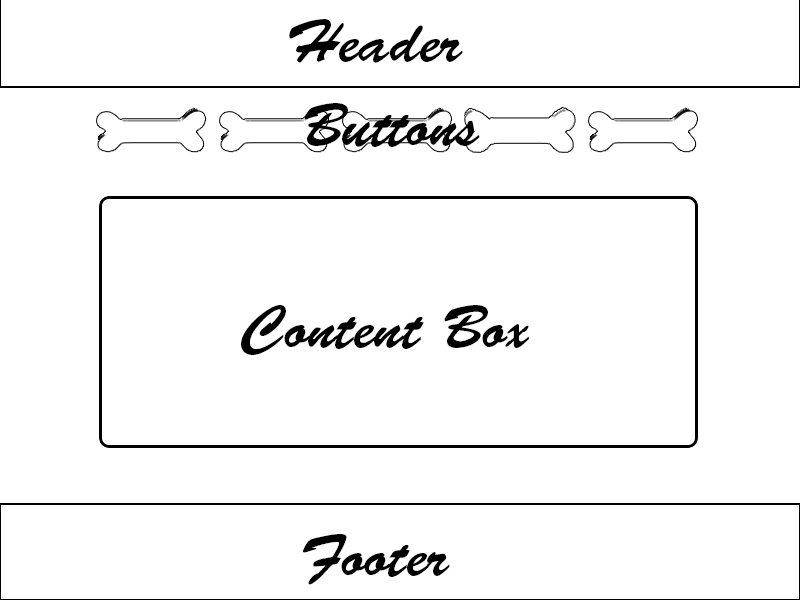
<style>
.page{position:relative;width:800px;height:600px;background:#ffffff}
.page>*{position:absolute;margin:0}
.t1{font:60px "BrushScriptStd";color:#000000}
</style>
<div class="page">
<p class="t1" style="left:289px;top:19px;width:174px;height:44px">Header</p>
<p class="t1" style="left:304px;top:103px;width:176px;height:44px">Buttons</p>
<p class="t1" style="left:241px;top:305px;width:288px;height:50px">Content Box</p>
<p class="t1" style="left:303px;top:534px;width:147px;height:51px">Footer</p>
</div>
